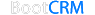
<style>
.page{position:relative;width:95px;height:15px;background:#ffffff}
.page>*{position:absolute;margin:0}
.t1{font:18.6px "MyriadPro-Regular";letter-spacing:0.015em}
.t2{font:18.6px "MyriadPro-Regular";letter-spacing:0.015em;color:#fefefe}
.t3{font:18.6px "MyriadPro-Regular";letter-spacing:0.015em;color:#007aff}
</style>
<div class="page">
<p class="t1" style="left:11px;top:0px;width:73px;height:14px">BootCRM</p>
<p class="t2" style="left:11px;top:0px;width:73px;height:14px">Boot<span class="t3">CRM</span></p>
</div>
